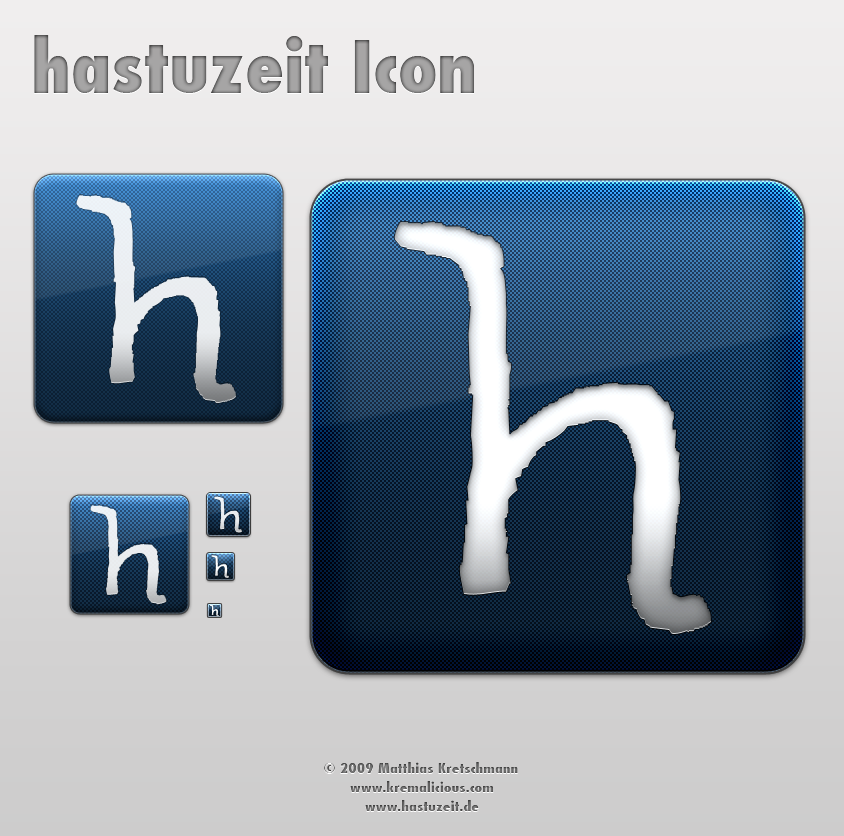
<style>
.page{position:relative;width:844px;height:836px}
.page>*{position:absolute;margin:0}
.t1{font:72px "Futura-CondensedExtraBold"}
.t2{font:14px "Futura-CondensedExtraBold"}
</style>
<div class="page">
<p class="t1" style="left:34px;top:35px;width:441px;height:59px">hastuzeit Icon</p>
<p class="t2" style="left:324px;top:762px;width:194px;height:12px">© 2009 Matthias Kretschmann</p>
<p class="t2" style="left:350px;top:781px;width:144px;height:12px">www.kremalicious.com</p>
<p class="t2" style="left:365px;top:800px;width:114px;height:12px">www.hastuzeit.de</p>
</div>
